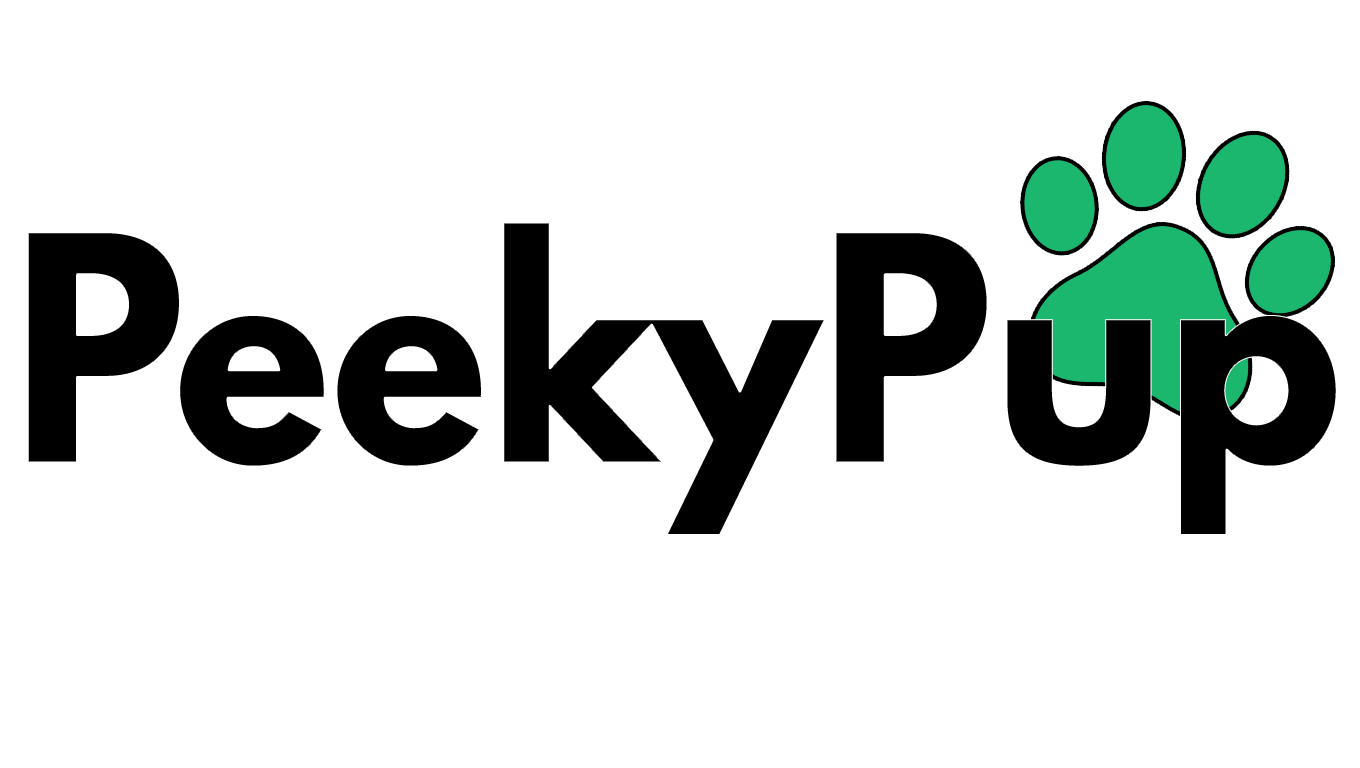
<style>
.page{position:relative;width:1360px;height:768px;background:#ffffff}
.page>*{position:absolute;margin:0}
.t1{font:278.9px "LeagueSpartan-Bold";color:#000000;scale:0.94 1}
</style>
<div class="page">
<p class="t1" style="left:27px;top:222px;width:1310px;height:313px">PeekyPup</p>
</div>
